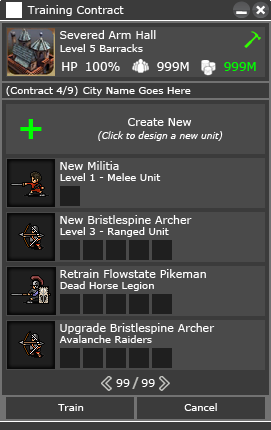
<style>
.page{position:relative;width:271px;height:430px;background:#4a4a4a}
.page>*{position:absolute;margin:0}
.t1{font:11px "Verdana";color:#ffffff}
.t2{font:10px "Verdana";color:#ffffff}
.t3{font:12px "Verdana";color:#ffffff}
.t4{font:12px "Verdana";color:#00ff00}
.t5{font:32px "Verdana-Bold";color:#00ff00}
.t6{font:9px "Verdana-Italic";color:#ffffff}
.t7{font:12px "Verdana-Bold";color:#b9bab6}
</style>
<div class="page">
<p class="t1" style="left:27px;top:5px;width:97px;height:11px">Training Contract</p>
<p class="t1" style="left:60px;top:30px;width:96px;height:9px">Severed Arm Hall</p>
<p class="t2" style="left:60px;top:44px;width:83px;height:8px">Level 5 Barracks</p>
<p class="t3" style="left:62px;top:62px;width:16px;height:9px">HP</p>
<p class="t3" style="left:86px;top:62px;width:34px;height:9px">100%</p>
<p class="t3" style="left:157px;top:62px;width:32px;height:9px">999M</p>
<p class="t4" style="left:224px;top:62px;width:32px;height:9px">999M</p>
<p class="t2" style="left:6px;top:86px;width:72px;height:10px">(Contract 4/9)</p>
<p class="t2" style="left:83px;top:87px;width:108px;height:9px">City Name Goes Here</p>
<p class="t5" style="left:20px;top:119px;width:22px;height:20px">+</p>
<p class="t1" style="left:128px;top:118px;width:64px;height:8px">Create New</p>
<p class="t6" style="left:98px;top:131px;width:125px;height:10px">(Click to design a new unit)</p>
<p class="t1" style="left:60px;top:161px;width:59px;height:9px">New Militia</p>
<p class="t2" style="left:60px;top:173px;width:101px;height:8px">Level 1 - Melee Unit</p>
<p class="t1" style="left:60px;top:215px;width:132px;height:11px">New Bristlespine Archer</p>
<p class="t2" style="left:60px;top:227px;width:109px;height:10px">Level 3 - Ranged Unit</p>
<p class="t1" style="left:60px;top:269px;width:146px;height:9px">Retrain Flowstate Pikeman</p>
<p class="t2" style="left:60px;top:281px;width:94px;height:10px">Dead Horse Legion</p>
<p class="t1" style="left:60px;top:323px;width:155px;height:11px">Upgrade Bristlespine Archer</p>
<p class="t2" style="left:59px;top:335px;width:93px;height:8px">Avalanche Raiders</p>
<p class="t7" style="left:132px;top:377px;width:7px;height:12px">/</p>
<p class="t1" style="left:116px;top:379px;width:14px;height:8px">99</p>
<p class="t1" style="left:141px;top:379px;width:14px;height:8px">99</p>
<p class="t2" style="left:58px;top:404px;width:26px;height:7px">Train</p>
<p class="t2" style="left:184px;top:403px;width:33px;height:8px">Cancel</p>
</div>
